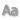
<style>
.page{position:relative;width:20px;height:20px;background:#ffffff}
.page>*{position:absolute;margin:0}
.t1{font:14px "Tahoma";color:#999999}
</style>
<div class="page">
<p class="t1" style="left:1px;top:4px;width:16px;height:12px">Aa</p>
</div>
